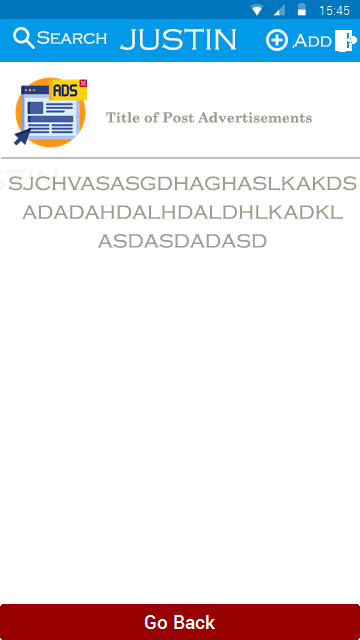
<style>
.page{position:relative;width:360px;height:640px;background:#ffffff}
.page>*{position:absolute;margin:0}
.t1{font:30px "CopperplateGothic-Light";color:#f6f6f0}
.t2{font:18px "CopperplateGothic-Light";color:#f6f6f0}
.t3{font:14px "CenturySchoolbook-Bold";color:#9c9c8f}
.t4{font:24px "CopperplateGothic-Light";color:#9c9c8f}
</style>
<div class="page">
<p class="t1" style="left:120px;top:28px;width:116px;height:22px">JUSTIN</p>
<p class="t2" style="left:37px;top:31px;width:70px;height:14px">Search</p>
<p class="t2" style="left:293px;top:34px;width:39px;height:13px">Add</p>
<p class="t3" style="left:106px;top:112px;width:206px;height:11px">Title of Post Advertisements</p>
<p class="t4" style="left:8px;top:176px;width:349px;height:72px;text-align:center">sjchvasasgdhaghaslkakds<br>adadahdalhdaldhlkadkl<br>asdasdadasd</p>
</div>
